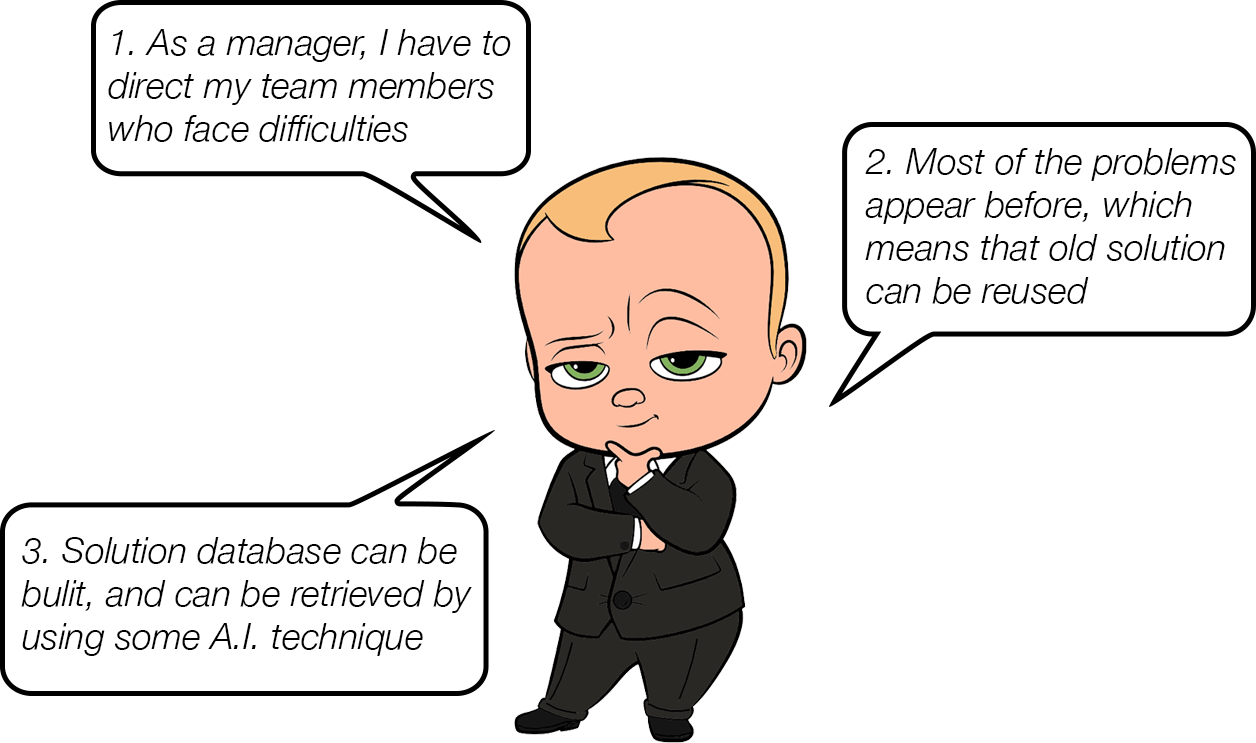
<style>
.page{position:relative;width:1256px;height:743px;background:#ffffff}
.page>*{position:absolute;margin:0}
.t1{font:36px "HelveticaNeue-LightItalic";color:#000000}
</style>
<div class="page">
<p class="t1" style="left:108px;top:29px;width:403px;height:113px">1. As a manager, I have to direct my team members who face difficulties</p>
<p class="t1" style="left:865px;top:148px;width:371px;height:156px">2. Most of the problems appear before, which means that old solution can be reused</p>
<p class="t1" style="left:21px;top:537px;width:451px;height:119px">3. Solution database can be bulit, and can be retrieved by using some A.I. technique</p>
</div>
